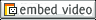
<style>
.page{position:relative;width:96px;height:20px;background:#fefefe}
.page>*{position:absolute;margin:0}
.t1{font:14px "Delicious-Roman";color:#393f3f}
</style>
<div class="page">
<p class="t1" style="left:20px;top:4px;width:72px;height:11px">embed video</p>
</div>
